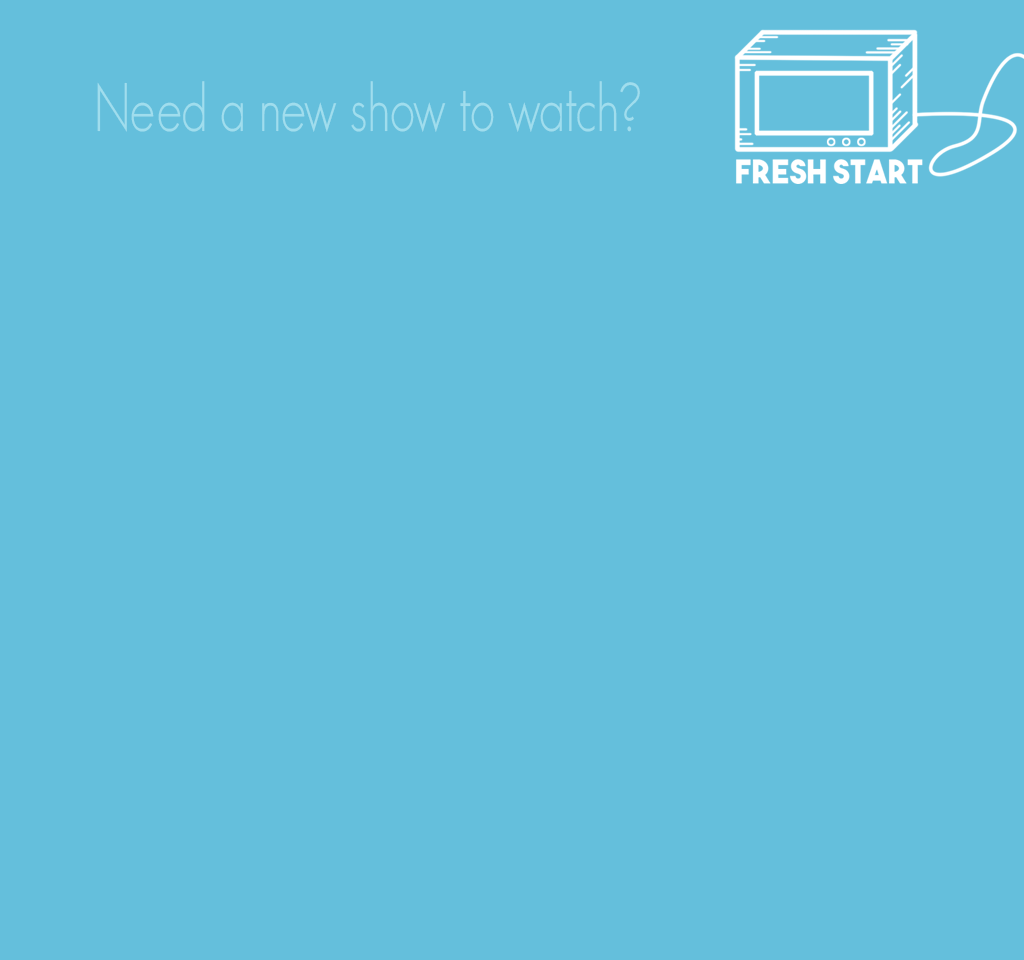
<style>
.page{position:relative;width:1024px;height:960px;background:#64bfdc}
.page>*{position:absolute;margin:0}
.t1{font:67.4px "GeosansLight";color:#a0dded;scale:0.75 1}
</style>
<div class="page">
<p class="t1" style="left:97px;top:81px;width:543px;height:51px">Need a new show to watch?</p>
</div>
